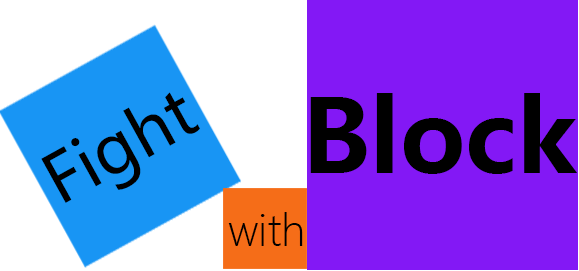
<style>
.page{position:relative;width:579px;height:271px;background:#8318f5}
.page>*{position:absolute;margin:0}
.t1{font:66.7px "MicrosoftYaHei";color:#000000}
.t2{font:100px "MicrosoftYaHei-Bold";color:#000000}
.t3{font:41.7px "MicrosoftYaHeiLight";color:#000000}
</style>
<div class="page">
<p class="t1" style="left:41px;top:92px;width:159px;height:111px;rotate:-29deg">Fight</p>
<p class="t2" style="left:310px;top:93px;width:267px;height:81px">Block</p>
<p class="t3" style="left:228px;top:212px;width:75px;height:34px">with</p>
</div>
